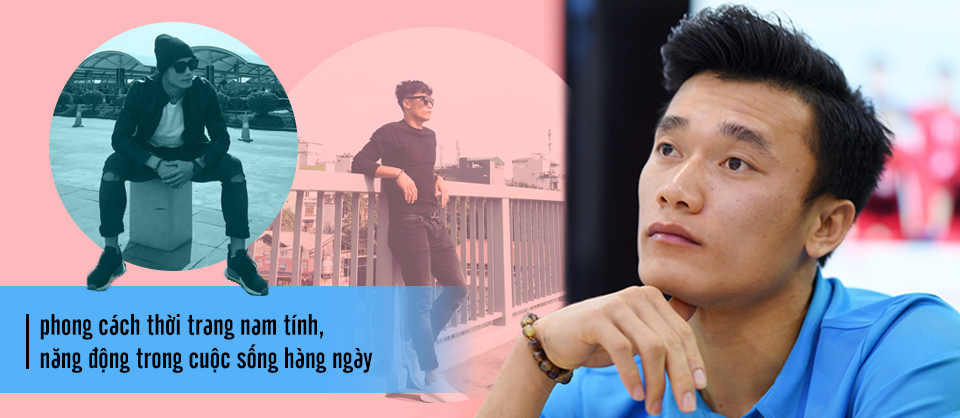
<style>
.page{position:relative;width:960px;height:418px}
.page>*{position:absolute;margin:0}
.t1{font:29.3px/33.3px "UTM-Cafeta";color:#000000}
</style>
<div class="page">
<p class="t1" style="left:40px;top:314px;width:333px;height:59px">phong cách thời trang nam tính,<br>năng động trong cuộc sống hàng ngày</p>
</div>
